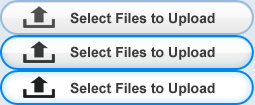
<style>
.page{position:relative;width:255px;height:105px}
.page>*{position:absolute;margin:0}
.t1{font:14px "Arial-BoldMT";color:#3b3b3b}
</style>
<div class="page">
<p class="t1" style="left:70px;top:12px;width:145px;height:14px">Select Files to Upload</p>
<p class="t1" style="left:70px;top:46px;width:145px;height:14px">Select Files to Upload</p>
<p class="t1" style="left:70px;top:82px;width:145px;height:14px">Select Files to Upload</p>
</div>
